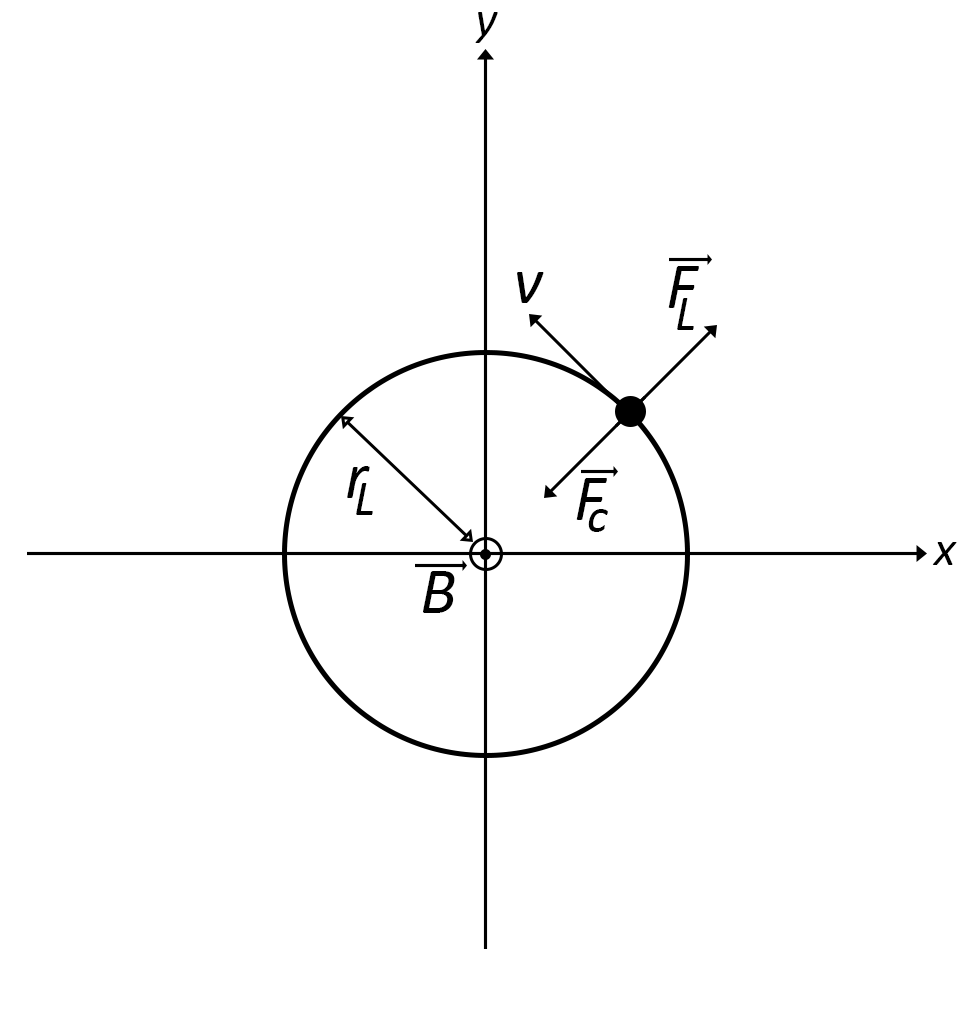
<style>
.page{position:relative;width:974px;height:1017px;background:#ffffff}
.page>*{position:absolute;margin:0}
.t1{font:50px "Calibri-Italic";color:#000000}
.t2{font:66.7px "Calibri-Italic";color:#000000}
</style>
<div class="page">
<p class="t1" style="left:475px;top:12px;width:23px;height:31px">y</p>
<p class="t2" style="left:668px;top:266px;width:31px;height:42px">F</p>
<p class="t2" style="left:517px;top:272px;width:27px;height:31px">v</p>
<p class="t1" style="left:677px;top:298px;width:17px;height:32px">L</p>
<p class="t2" style="left:347px;top:466px;width:23px;height:32px">r</p>
<p class="t1" style="left:356px;top:483px;width:17px;height:32px">L</p>
<p class="t2" style="left:576px;top:478px;width:31px;height:42px">F</p>
<p class="t1" style="left:588px;top:509px;width:20px;height:23px">c</p>
<p class="t1" style="left:932px;top:542px;width:25px;height:23px">x</p>
<p class="t2" style="left:423px;top:571px;width:32px;height:42px">B</p>
</div>
